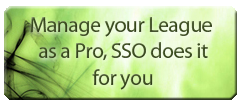
<style>
.page{position:relative;width:242px;height:106px}
.page>*{position:absolute;margin:0}
.t1{font:22px "MyriadPro-Regular";letter-spacing:-0.025em;color:#405222}
</style>
<div class="page">
<p class="t1" style="left:30px;top:17px;width:182px;height:73px;text-align:center">Manage your League <br>as a Pro, SSO does it<br>for you</p>
</div>
